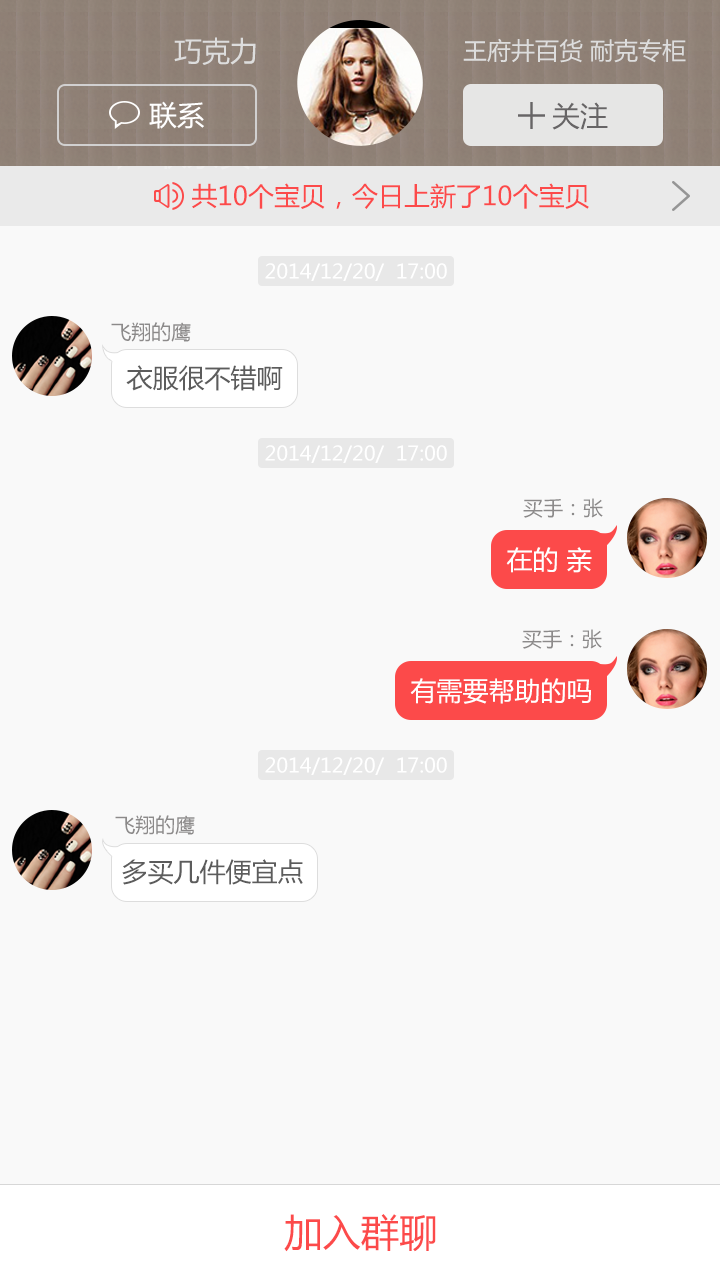
<style>
.page{position:relative;width:720px;height:1280px;background:#f9f9f9}
.page>*{position:absolute;margin:0}
.t1{font:28px "MicrosoftYaHei";color:#dddddd}
.t2{font:24px "MicrosoftYaHei";color:#dddddd}
.t3{font:28px "MicrosoftYaHei";color:#ffffff}
.t4{font:28px "MicrosoftYaHei";color:#676566}
.t5{font:26px "MicrosoftYaHei";color:#fc4a4a}
.t6{font:20px "MicrosoftYaHei";color:#ffffff}
.t7{font:20px "MicrosoftYaHei";color:#8c8a8a}
.t8{font:26px "MicrosoftYaHei";color:#5c5c5c}
.t9{font:26px "MicrosoftYaHei";color:#ffffff}
.t10{font:38px "MicrosoftYaHei";letter-spacing:0.01em;color:#fc4a4a}
</style>
<div class="page">
<p class="t1" style="left:174px;top:37px;width:82px;height:28px">巧克力</p>
<p class="t2" style="left:463px;top:38px;width:223px;height:25px">王府井百货 耐克专柜</p>
<p class="t3" style="left:149px;top:101px;width:55px;height:28px">联系</p>
<p class="t4" style="left:552px;top:102px;width:56px;height:28px">关注</p>
<p class="t5" style="left:192px;top:183px;width:397px;height:26px">共10个宝贝，今日上新了10个宝贝</p>
<p class="t6" style="left:265px;top:263px;width:182px;height:18px">2014/12/20/  17:00</p>
<p class="t7" style="left:111px;top:322px;width:80px;height:20px">飞翔的鹰</p>
<p class="t8" style="left:126px;top:365px;width:157px;height:26px">衣服很不错啊</p>
<p class="t6" style="left:265px;top:445px;width:182px;height:18px">2014/12/20/  17:00</p>
<p class="t7" style="left:523px;top:498px;width:80px;height:20px">买手：张</p>
<p class="t9" style="left:506px;top:547px;width:86px;height:26px">在的 亲</p>
<p class="t7" style="left:522px;top:629px;width:80px;height:20px">买手：张</p>
<p class="t9" style="left:410px;top:678px;width:181px;height:26px">有需要帮助的吗</p>
<p class="t6" style="left:265px;top:757px;width:182px;height:18px">2014/12/20/  17:00</p>
<p class="t7" style="left:115px;top:815px;width:80px;height:20px">飞翔的鹰</p>
<p class="t8" style="left:122px;top:859px;width:181px;height:26px">多买几件便宜点</p>
<p class="t10" style="left:284px;top:1214px;width:152px;height:38px">加入群聊</p>
</div>
